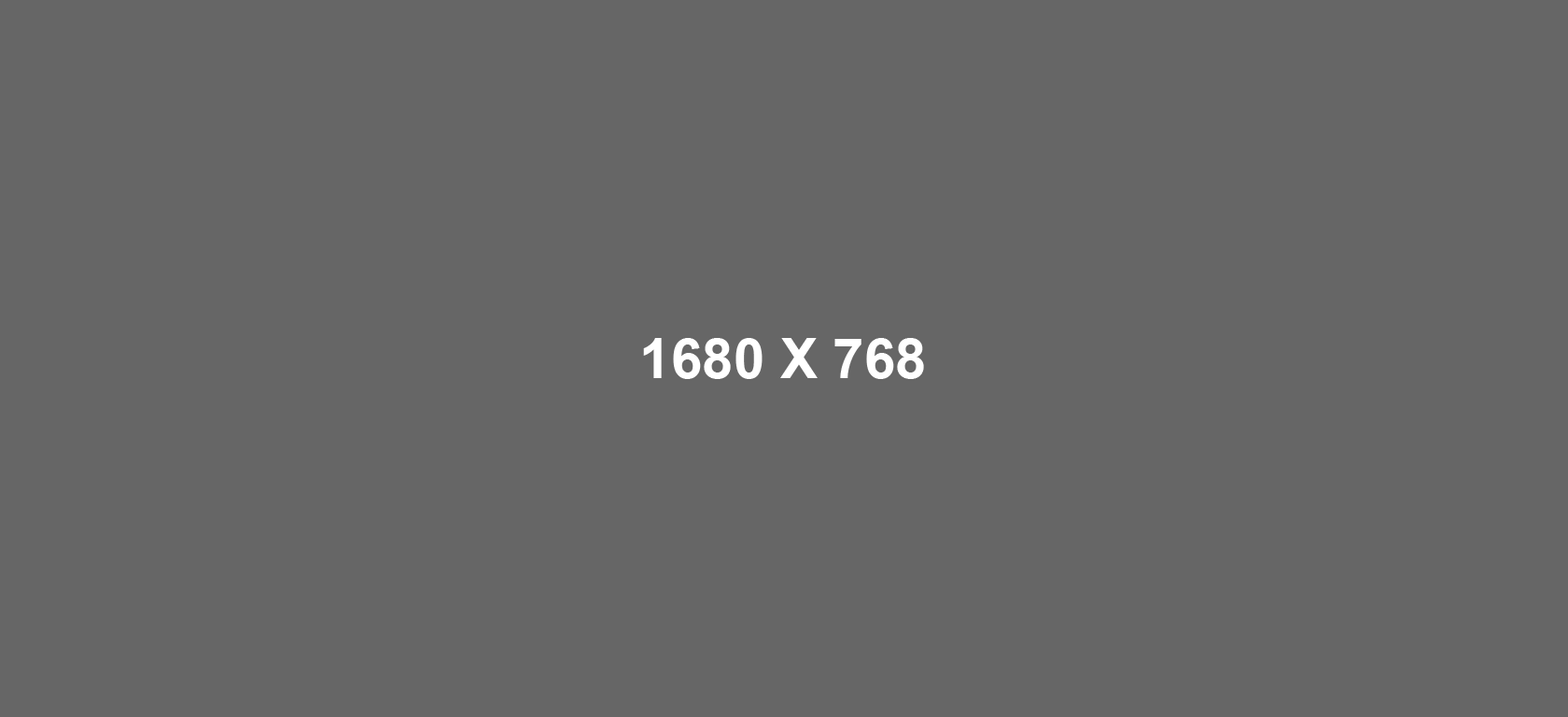
<style>
.page{position:relative;width:1568px;height:717px;background:#666666}
.page>*{position:absolute;margin:0}
.t1{font:56px "Arial-BoldMT";color:#ffffff;text-transform:uppercase}
</style>
<div class="page">
<p class="t1" style="left:643px;top:338px;width:281px;height:41px">1680 x 768</p>
</div>
